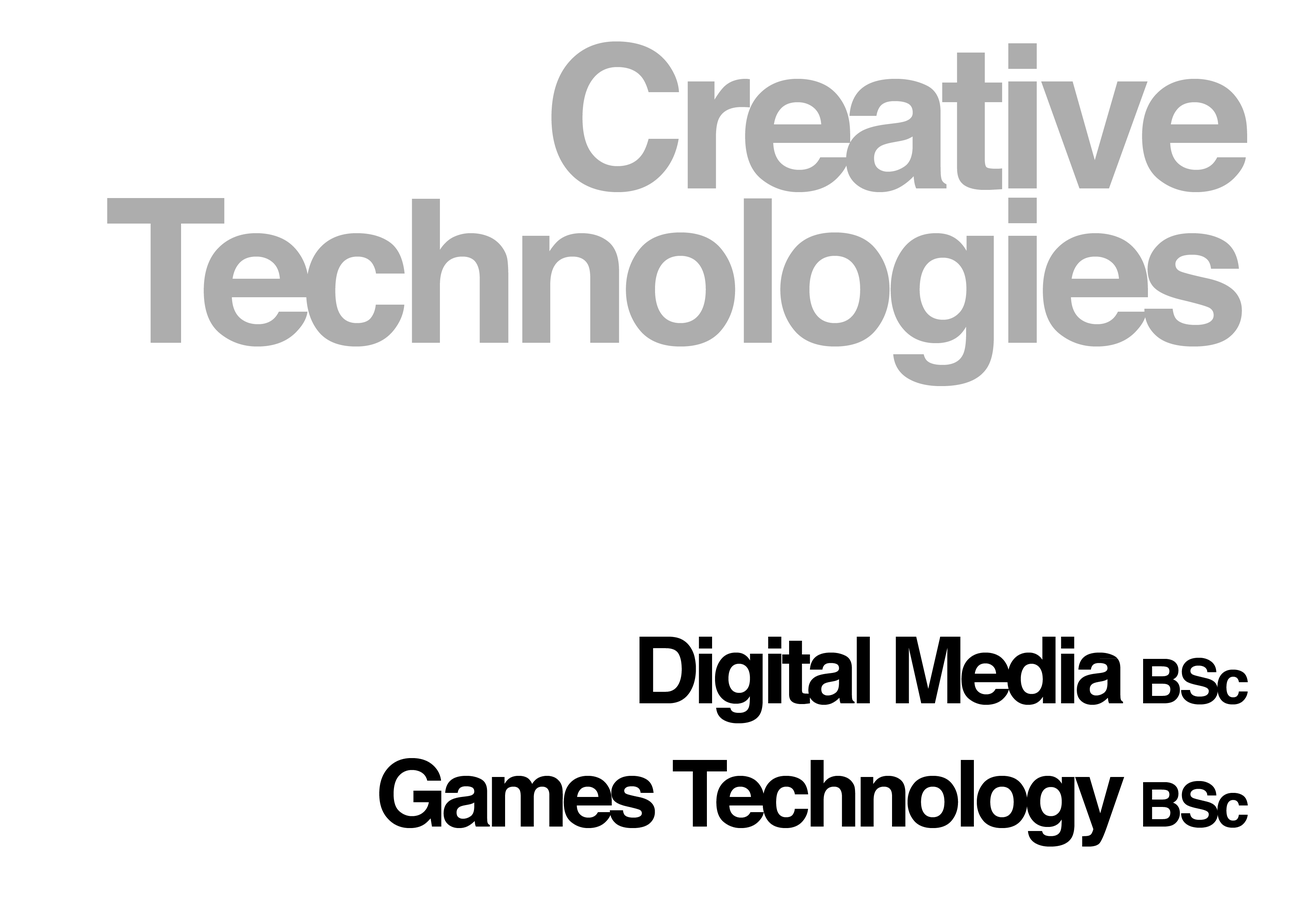
<style>
.page{position:relative;width:1299px;height:918px;background:#ffffff}
.page>*{position:absolute;margin:0}
.t1{font:200.5px/154.3px "Helvetica-Bold";letter-spacing:-0.06em;color:#adadad}
.t2{font:92.6px/123.4px "Helvetica-Bold";letter-spacing:-0.07em;color:#000000}
.t3{font:61.7px/123.4px "Helvetica-Bold";letter-spacing:-0.07em;color:#000000}
</style>
<div class="page">
<p class="t1" style="left:107px;top:41px;width:1140px;height:345px;text-align:right">Creative Technologies</p>
<p class="t2" style="left:379px;top:637px;width:869px;height:210px;text-align:right">Digital Media <span class="t3">BSc<br></span>Games Technology <span class="t3">BSc</span></p>
</div>
